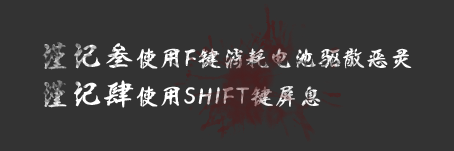
<style>
.page{position:relative;width:454px;height:151px;background:#333333}
.page>*{position:absolute;margin:0}
.t1{font:24px "HDZK--HSJHDTJ-01"}
.t2{font:32px "HDZK--HSJHDTJ-01"}
</style>
<div class="page">
<p class="t1" style="left:42px;top:42px;width:370px;height:66px"><span class="t2">谨记叁</span>使用F键消耗电池驱散恶灵<br><span class="t2">谨记肆</span>使用SHIFT键屏息</p>
</div>
